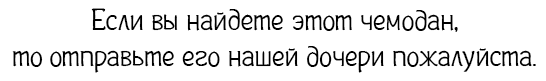
<style>
.page{position:relative;width:546px;height:81px;background:#ffffff}
.page>*{position:absolute;margin:0}
.t1{font:30px "Plainot";color:#000000}
</style>
<div class="page">
<p class="t1" style="left:12px;top:8px;width:524px;height:65px;text-align:center">Если вы найдете этот чемодан,<br>то отправьте его нашей дочери пожалуйста.</p>
</div>
